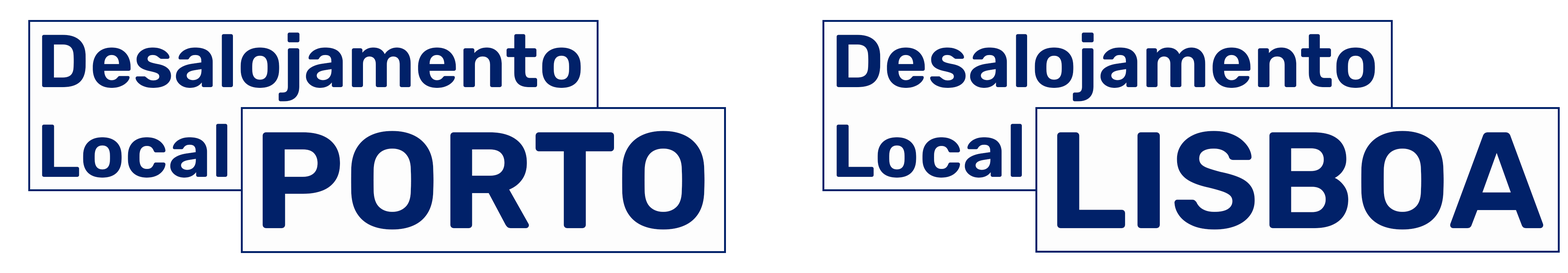
<style>
.page{position:relative;width:1568px;height:273px;background:#fdfdfd}
.page>*{position:absolute;margin:0}
.t1{font:74.6px "Rubik-SemiBold";color:#012169}
.t2{font:136.8px "Rubik-SemiBold";color:#012169}
</style>
<div class="page">
<p class="t1" style="left:42px;top:32px;width:539px;height:146px">Desalojamento<br>Local</p>
<p class="t1" style="left:836px;top:32px;width:539px;height:146px">Desalojamento<br>Local</p>
<p class="t2" style="left:262px;top:131px;width:443px;height:99px">PORTO</p>
<p class="t2" style="left:1057px;top:131px;width:487px;height:99px">LISBOA</p>
</div>
